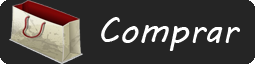
<style>
.page{position:relative;width:255px;height:64px;background:#252525}
.page>*{position:absolute;margin:0}
.t1{font:36px "MVBoli";color:#ffffff}
</style>
<div class="page">
<p class="t1" style="left:101px;top:17px;width:139px;height:34px">Comprar</p>
</div>
